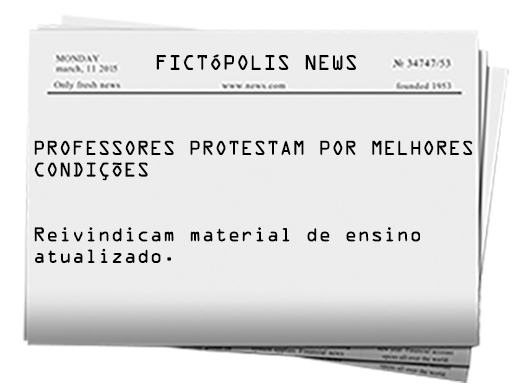
<style>
.page{position:relative;width:512px;height:387px;background:#ededed}
.page>*{position:absolute;margin:0}
.t1{font:18.8px "OCRAStd";color:#000000}
.t2{font:18px "OCRAStd";color:#000000}
</style>
<div class="page">
<p class="t1" style="left:156px;top:54px;width:200px;height:16px">FICTÓPOLIS NEWS</p>
<p class="t2" style="left:34px;top:140px;width:439px;height:123px">PROFESSORES PROTESTAM POR MELHORES<br>CONDIÇÕES <br><br><br>Reivindicam material de ensino <br>atualizado.</p>
</div>
